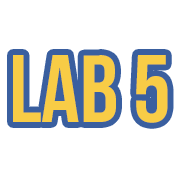
<style>
.page{position:relative;width:180px;height:180px;background:#ffffff}
.page>*{position:absolute;margin:0}
.t1{font:95px "BebasNeueBold";color:#f8cc46}
</style>
<div class="page">
<p class="t1" style="left:13px;top:55px;width:155px;height:68px">lab 5</p>
</div>
